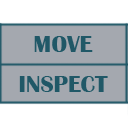
<style>
.page{position:relative;width:128px;height:128px;background:#a4a8af}
.page>*{position:absolute;margin:0}
.t1{font:24px "BritannicBold";color:#205867}
</style>
<div class="page">
<p class="t1" style="left:34px;top:36px;width:59px;height:16px">MOVE</p>
<p class="t1" style="left:19px;top:76px;width:89px;height:16px">INSPECT</p>
</div>
